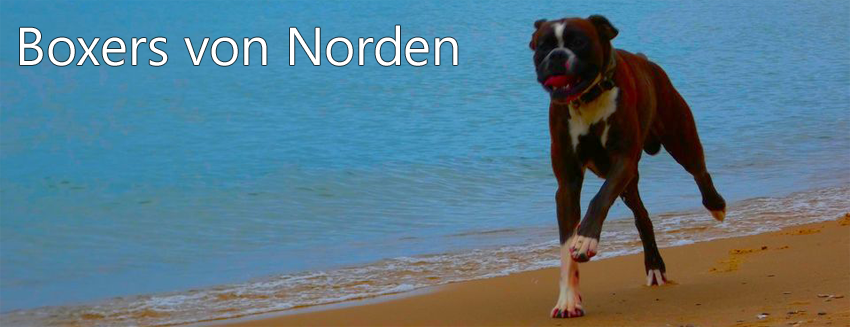
<style>
.page{position:relative;width:850px;height:327px}
.page>*{position:absolute;margin:0}
.t1{font:53.2px "SegoeUISymbol";color:#ffffff}
</style>
<div class="page">
<p class="t1" style="left:20px;top:25px;width:438px;height:41px">Boxers von Norden</p>
</div>
